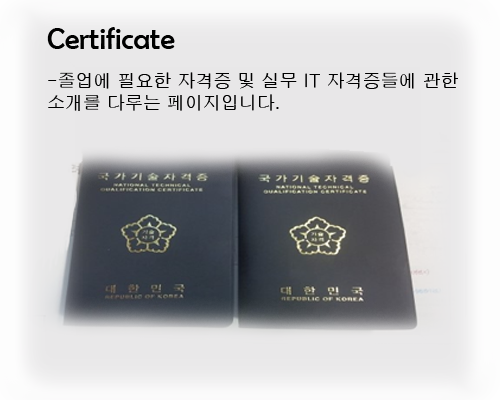
<style>
.page{position:relative;width:500px;height:400px}
.page>*{position:absolute;margin:0}
.t1{font:30px "BerlinSansFB-Reg";color:#000000}
.t2{font:18px "H2gprM";color:#000000}
</style>
<div class="page">
<p class="t1" style="left:47px;top:27px;width:128px;height:22px">Certificate</p>
<p class="t2" style="left:48px;top:72px;width:410px;height:39px">-졸업에 필요한 자격증 및 실무 IT 자격증들에 관한 소개를 다루는 페이지입니다.</p>
</div>
